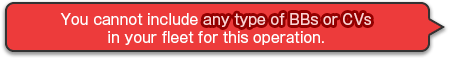
<style>
.page{position:relative;width:450px;height:58px;background:#ed3b3b}
.page>*{position:absolute;margin:0}
.t1{font:14px/18px "GothicMB101Pro-Regular";color:#ffffff}
.t2{font:14px/18px "GothicMB101Pro-Regular";color:#ffd3d3}
</style>
<div class="page">
<p class="t1" style="left:60px;top:13px;width:311px;height:32px;text-align:center">You cannot include <span class="t2">any type of BBs or CVs<br></span>in your fleet for this operation.</p>
<p class="t1" style="left:60px;top:13px;width:311px;height:32px;text-align:center">You cannot include <span class="t2">any type of BBs or CVs<br></span>in your fleet for this operation.</p>
</div>
